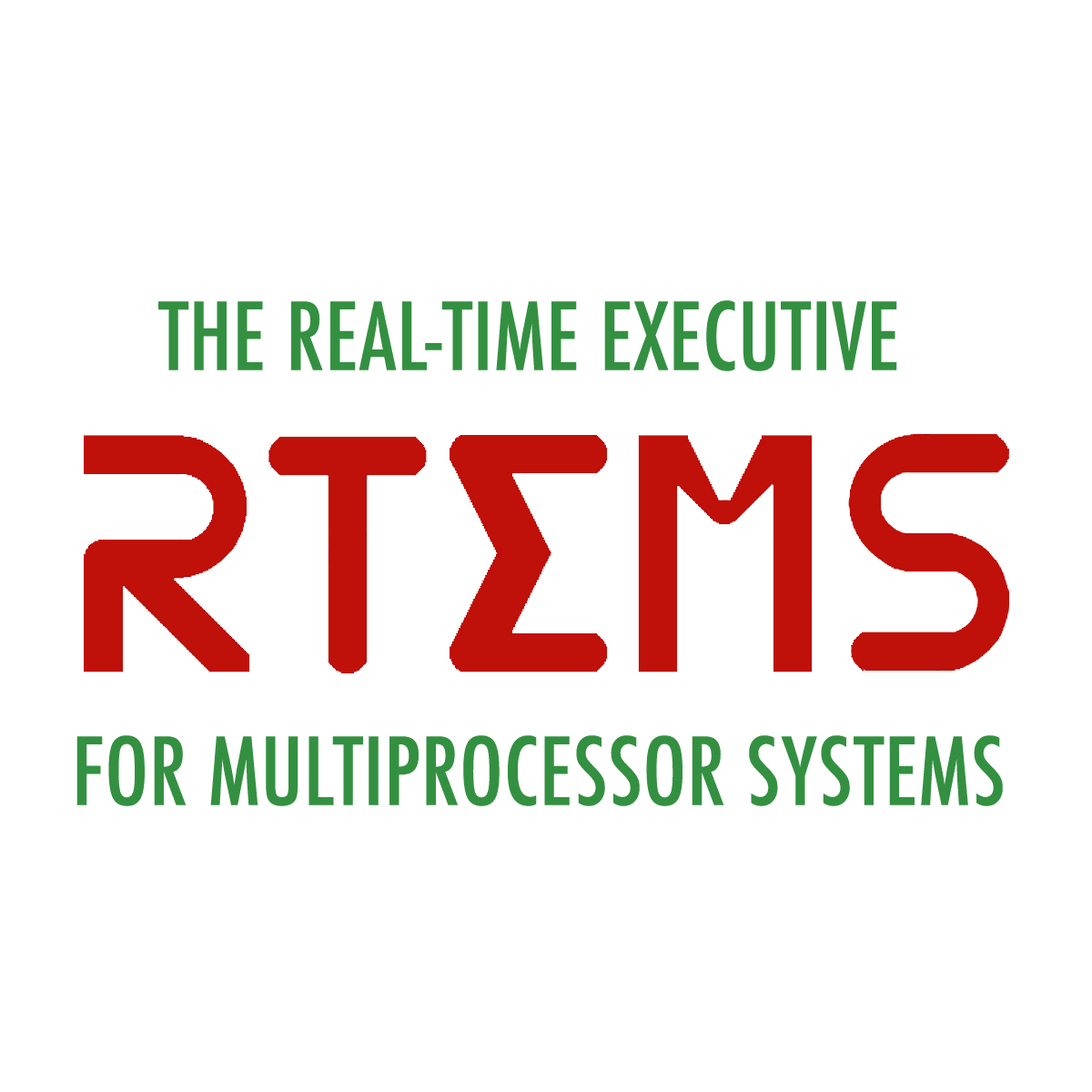
<style>
.page{position:relative;width:1092px;height:1092px;background:#ffffff}
.page>*{position:absolute;margin:0}
.t1{font:91px "Futura-CondensedMedium";letter-spacing:0.009em;color:#349041;text-transform:uppercase}
</style>
<div class="page">
<p class="t1" style="left:158px;top:300px;width:739px;height:71px">The Real-Time Executive</p>
<p class="t1" style="left:76px;top:735px;width:927px;height:71px">for Multiprocessor Systems</p>
</div>
